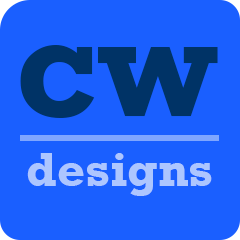
<style>
.page{position:relative;width:240px;height:240px;background:#1a5fff}
.page>*{position:absolute;margin:0}
.t1{font:147px "Rockwell-Bold";color:#003366}
.t2{font:49px "Rockwell-Bold";color:#adc6ff}
</style>
<div class="page">
<p class="t1" style="left:20px;top:45px;width:198px;height:73px">cw</p>
<p class="t2" style="left:27px;top:153px;width:185px;height:43px">designs</p>
</div>
